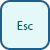
<style>
.page{position:relative;width:50px;height:50px;background:#e5f8f8}
.page>*{position:absolute;margin:0}
.t1{font:12px "MyriadPro-Regular";color:#066665}
</style>
<div class="page">
<p class="t1" style="left:17px;top:21px;width:16px;height:9px">Esc</p>
</div>
